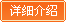
<style>
.page{position:relative;width:66px;height:22px;background:#f86818}
.page>*{position:absolute;margin:0}
.t1{font:12px "SimSun";color:#ffffff}
</style>
<div class="page">
<p class="t1" style="left:10px;top:5px;width:47px;height:11px">详细介绍</p>
</div>
